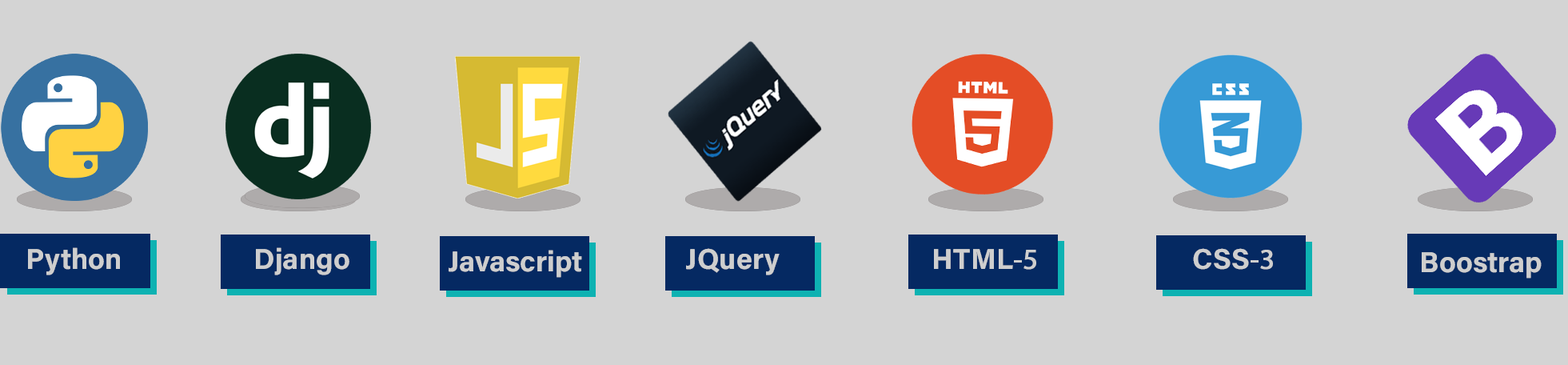
<style>
.page{position:relative;width:1568px;height:365px;background:#d4d4d4}
.page>*{position:absolute;margin:0}
.t1{font:28.8px "AcuminConcept-Bold";color:#cecece;font-weight:bold}
.t2{font:28.8px "MyriadPro-Regular";color:#cecece;font-weight:bold}
</style>
<div class="page">
<p class="t1" style="left:28px;top:247px;width:92px;height:28px">Python</p>
<p class="t1" style="left:256px;top:247px;width:93px;height:28px">Django</p>
<p class="t1" style="left:449px;top:249px;width:133px;height:28px">Javascript</p>
<p class="t1" style="left:686px;top:248px;width:94px;height:27px">JQuery</p>
<p class="t1" style="left:934px;top:249px;width:102px;height:20px">HTML<span class="t2">-5</span></p>
<p class="t1" style="left:1193px;top:248px;width:80px;height:21px">CSS<span class="t2">-3</span></p>
<p class="t1" style="left:1422px;top:252px;width:120px;height:26px">Boostrap</p>
</div>
